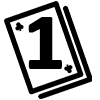
<style>
.page{position:relative;width:100px;height:100px;background:#ffffff}
.page>*{position:absolute;margin:0}
.t1{font:79.6px "Calibri-Bold";color:#000000;font-weight:bold}
</style>
<div class="page">
<p class="t1" style="left:28px;top:17px;width:34px;height:52px">1</p>
</div>
